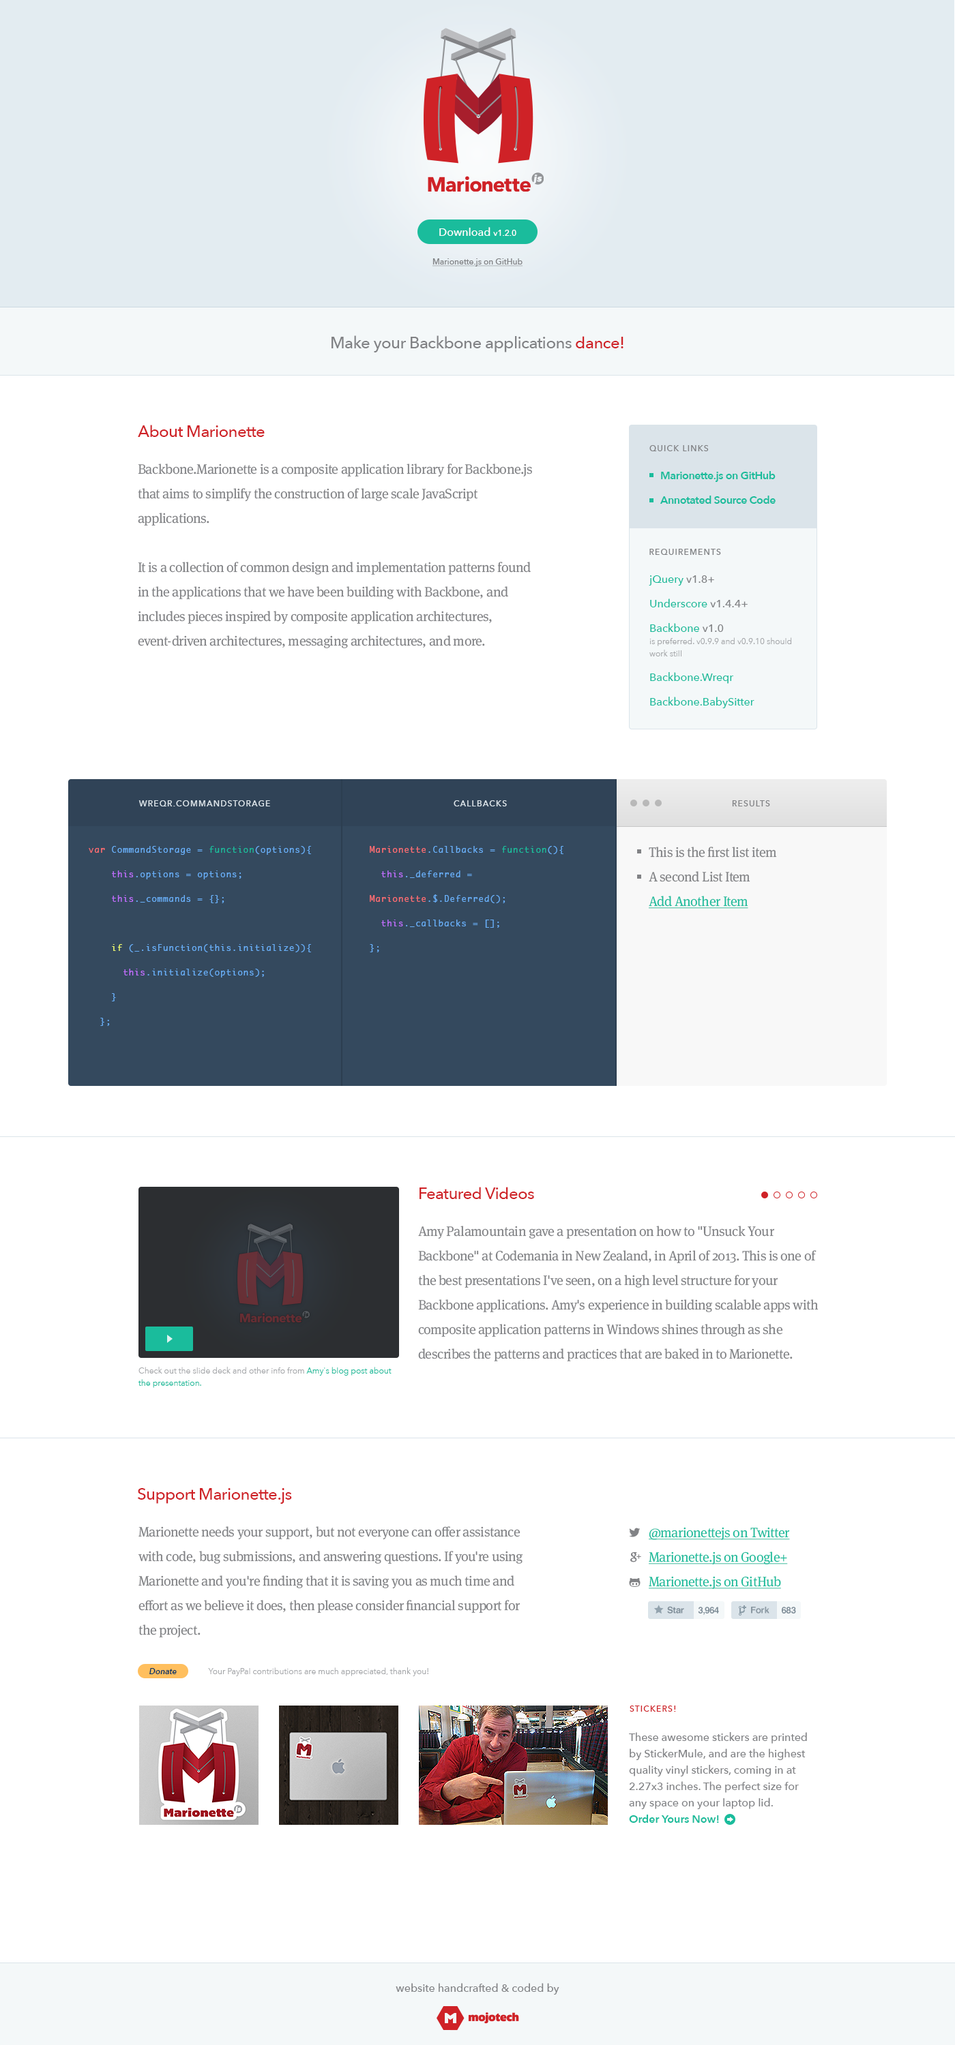
<style>
.page{position:relative;width:955px;height:2045px;background:#ffffff}
.page>*{position:absolute;margin:0}
.t1{font:10.9px "AvenirNext-Medium";color:#ffffff}
.t2{font:8.2px "AvenirNext-Medium";color:#ffffff}
.t3{font:8.2px "AvenirNext-Medium";color:#818285;text-decoration:underline}
.t4{font:16.4px "AvenirNext-Medium";letter-spacing:-0.025em;color:#818285}
.t5{font:16.4px "AvenirNext-Medium";letter-spacing:-0.025em;color:#cf2227}
.t6{font:8.2px "AvenirNext-Medium";letter-spacing:0.1em;color:#818285;text-transform:uppercase}
.t7{font:13.6px/24.5px "MetaSerifOT-Book";letter-spacing:-0.025em;color:#818285}
.t8{font:10.9px/24.5px "AvenirNext-DemiBold";letter-spacing:-0.025em;color:#1abc9c}
.t9{font:8.2px/12.3px "AvenirNext-Regular";color:#a7a9ac}
.t10{font:10.9px/24.5px "AvenirNext-Medium";color:#1abc9c}
.t11{font:10.9px/24.5px "AvenirNext-Medium";color:#818285}
.t12{font:8.2px "AvenirNext-Medium";letter-spacing:0.1em;color:#dbe4ea;text-transform:uppercase}
.t13{font:8.2px/24.5px "Monaco";letter-spacing:0.1em;color:#69aff8}
.t14{font:8.2px/24.5px "Monaco";letter-spacing:0.1em;color:#ff6e72}
.t15{font:8.2px/24.5px "Monaco";letter-spacing:0.1em;color:#1abc9c}
.t16{font:8.2px/24.5px "Monaco";letter-spacing:0.1em;color:#c06eff}
.t17{font:8.2px/24.5px "Monaco";letter-spacing:0.1em;color:#f0ff6e}
.t18{font:13.6px/24.5px "MetaSerifOT-Book";letter-spacing:-0.025em;color:#1abc9c;text-decoration:underline}
.t19{font:8.2px/12.3px "AvenirNext-Regular";color:#1abc9c}
.t20{font:9px "Helvetica-Bold";letter-spacing:-0.02em;color:#7e8d98}
.t21{font:8.2px "AvenirNext-DemiBoldItalic";color:#003366}
.t22{font:8.2px "AvenirNext-Regular";color:#a7a9ac}
.t23{font:8.2px "AvenirNext-Medium";letter-spacing:0.1em;color:#cf2227;text-transform:uppercase}
.t24{font:10.9px/16.4px "AvenirNext-Medium";color:#818285}
.t25{font:10.9px/16.4px "AvenirNext-DemiBold";color:#1abc9c}
.t26{font:10.9px "AvenirNext-Medium";color:#818285}
</style>
<div class="page">
<p class="t1" style="left:439px;top:227px;width:77px;height:9px">Download <span class="t2">v1.2.0</span></p>
<p class="t3" style="left:432px;top:258px;width:91px;height:9px">Marionette.js on GitHub</p>
<p class="t4" style="left:331px;top:335px;width:292px;height:17px">Make your Backbone applications <span class="t5">dance!</span></p>
<p class="t5" style="left:138px;top:425px;width:127px;height:12px">About Marionette</p>
<p class="t6" style="left:649px;top:445px;width:59px;height:6px">Quick Links</p>
<p class="t7" style="left:138px;top:464px;width:394px;height:184px">Backbone.Marionette is a composite application library for Backbone.js that aims to simplify the construction of large scale JavaScript applications.<br><br>It is a collection of common design and implementation patterns found in the applications that we have been building with Backbone, and includes pieces inspired by composite application architectures, event-driven architectures, messaging architectures, and more.</p>
<p class="t8" style="left:659px;top:471px;width:116px;height:33px">Marionette.js on GitHub<br>Annotated Source Code</p>
<p class="t6" style="left:649px;top:549px;width:72px;height:6px">Requirements</p>
<p class="t9" style="left:648px;top:575px;width:144px;height:133px"><span class="t10">jQuery</span><span class="t11"> v1.8+<br></span><span class="t10">Underscore</span><span class="t11"> v1.4.4+<br></span><span class="t10">Backbone</span><span class="t11"> v1.0<br></span>is preferred. v0.9.9 and v0.9.10 should work still<br><span class="t10">Backbone.Wreqr<br>Backbone.BabySitter</span></p>
<p class="t12" style="left:138px;top:800px;width:132px;height:7px">Wreqr.CommandStorage</p>
<p class="t12" style="left:453px;top:800px;width:54px;height:7px">Callbacks</p>
<p class="t6" style="left:732px;top:800px;width:38px;height:7px">results</p>
<p class="t13" style="left:89px;top:846px;width:222px;height:180px"><span class="t14">var </span>CommandStorage = <span class="t15">function</span>(options){<br>    <span class="t16">this</span>.options = options;<br>    <span class="t16">this</span>._commands = {};<br><br>    <span class="t17">if</span> (_.isFunction(this.initialize)){<br>      <span class="t16">this</span>.initialize(options);<br>    }<br>  };</p>
<p class="t13" style="left:370px;top:846px;width:193px;height:106px"><span class="t14">Marionette</span>.Callbacks = <span class="t15">function</span>(){<br>  <span class="t16">this</span>._deferred = <span class="t14">Marionette</span>.$.Deferred();<br>  <span class="t16">this</span>._callbacks = [];<br>};</p>
<p class="t7" style="left:648px;top:847px;width:129px;height:62px">This is the first list item<br>A second List Item<br><span class="t18">Add Another Item</span></p>
<p class="t5" style="left:419px;top:1187px;width:115px;height:12px">Featured Videos</p>
<p class="t7" style="left:418px;top:1226px;width:400px;height:136px">Amy Palamountain gave a presentation on how to "Unsuck Your Backbone" at Codemania in New Zealand, in April of 2013. This is one of the best presentations I've seen, on a high level structure for your Backbone applications. Amy's experience in building scalable apps with composite application patterns in Windows shines through as she describes the patterns and practices that are baked in to Marionette.</p>
<p class="t9" style="left:138px;top:1367px;width:253px;height:21px">Check out the slide deck and other info from <span class="t19">Amy's blog post about the presentation.</span></p>
<p class="t5" style="left:137px;top:1488px;width:155px;height:16px">Support Marionette.js</p>
<p class="t7" style="left:138px;top:1527px;width:385px;height:111px">Marionette needs your support, but not everyone can offer assistance with code, bug submissions, and answering questions. If you're using Marionette and you're finding that it is saving you as much time and effort as we believe it does, then please consider financial support for the project.</p>
<p class="t18" style="left:648px;top:1527px;width:142px;height:62px">@marionettejs on Twitter<br>Marionette.js on Google+<br>Marionette.js on GitHub</p>
<p class="t20" style="left:667px;top:1606px;width:17px;height:8px">Star</p>
<p class="t20" style="left:698px;top:1607px;width:21px;height:8px">3,964</p>
<p class="t20" style="left:751px;top:1607px;width:18px;height:7px;opacity:0.9">Fork</p>
<p class="t20" style="left:781px;top:1607px;width:15px;height:7px">683</p>
<p class="t21" style="left:149px;top:1668px;width:28px;height:7px">Donate</p>
<p class="t22" style="left:208px;top:1668px;width:220px;height:9px">Your PayPal contributions are much appreciated, thank you!</p>
<p class="t23" style="left:629px;top:1706px;width:47px;height:6px">stickers!</p>
<p class="t24" style="left:629px;top:1732px;width:178px;height:91px">These awesome stickers are printed by StickerMule, and are the highest quality vinyl stickers, coming in at 2.27x3 inches. The perfect size for any space on your laptop lid.<br><span class="t25">Order Yours Now!</span></p>
<p class="t26" style="left:395px;top:1983px;width:164px;height:12px">website handcrafted &amp; coded by</p>
</div>
